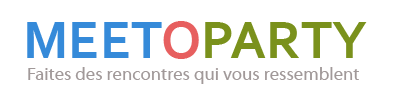
<style>
.page{position:relative;width:400px;height:100px;background:#ffffff}
.page>*{position:absolute;margin:0}
.t1{font:55px "Corbel-Bold";color:#7a911c}
.t2{font:55px "Corbel-Bold";color:#358ad9}
.t3{font:55px "Corbel-Bold";color:#e75f5f}
.t4{font:18px "MyriadWebPro";color:#a19999}
</style>
<div class="page">
<p class="t1" style="left:27px;top:21px;width:340px;height:38px"><span class="t2">MEET</span><span class="t3">O</span>PARTY</p>
<p class="t4" style="left:28px;top:67px;width:331px;height:17px">Faites des rencontres qui vous ressemblent</p>
</div>
